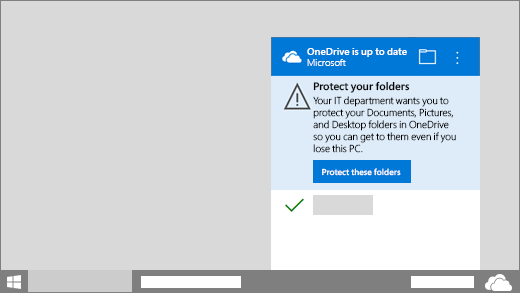
<style>
.page{position:relative;width:520px;height:293px;background:#d9d9d9}
.page>*{position:absolute;margin:0}
.t1{font:10px "SegoePro-Semibold";color:#fefefe}
.t2{font:10px "SegoePro-Light";color:#fefefe}
.t3{font:10.8px "SegoePro-Semibold";color:#000000}
.t4{font:10px "SegoePro-Light";color:#000000}
.t5{font:8.6px "SegoePro-Semibold";color:#ffffff}
</style>
<div class="page">
<p class="t1" style="left:307px;top:48px;width:100px;height:9px">OneDrive is up to date</p>
<p class="t2" style="left:307px;top:59px;width:39px;height:7px">Microsoft</p>
<p class="t3" style="left:313px;top:81px;width:97px;height:12px">Protect your folders</p>
<p class="t4" style="left:313px;top:96px;width:143px;height:57px">Your IT department wants you to <br>protect your Documents, Pictures, <br>and Desktop folders in OneDrive <br>so you can get to them even if you <br>lose this PC.</p>
<p class="t5" style="left:322px;top:168px;width:79px;height:8px">Protect these folders</p>
</div>
